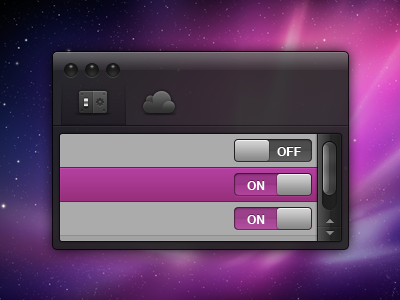
<style>
.page{position:relative;width:400px;height:300px}
.page>*{position:absolute;margin:0}
.t1{font:12px "Helvetica-Bold";color:#ffffff}
</style>
<div class="page">
<p class="t1" style="left:277px;top:147px;width:24px;height:9px">OFF</p>
<p class="t1" style="left:247px;top:181px;width:18px;height:9px">ON</p>
<p class="t1" style="left:247px;top:215px;width:18px;height:9px">ON</p>
</div>
